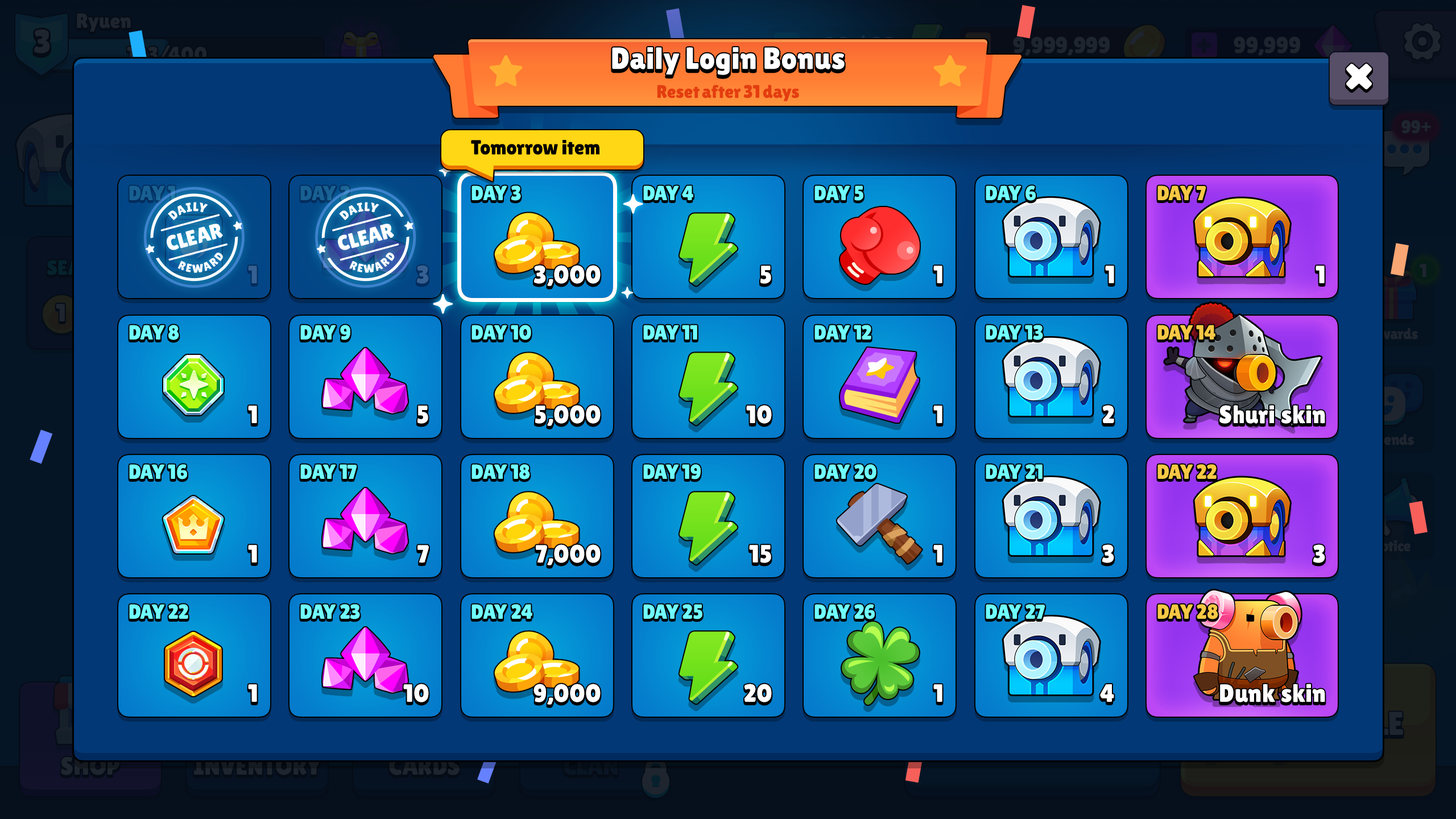
<style>
.page{position:relative;width:1456px;height:819px}
.page>*{position:absolute;margin:0}
.t1{font:30.7px "LilitaOne";color:#ffffff}
.t2{font:18.2px "LilitaOne";letter-spacing:-0.025em;color:#e43d0f}
.t3{font:20.5px "LilitaOne";letter-spacing:-0.01em;color:#000000}
.t4{font:20.5px/139.5px "LilitaOne";color:#70fdff;text-transform:uppercase}
.t5{font:20.5px/139.5px "LilitaOne";color:#f6c845;text-transform:uppercase}
.t6{font:12.7px "LilitaOne";letter-spacing:0.02em;color:#ffffff;text-transform:uppercase}
.t7{font:21.2px "LilitaOne";color:#ffffff;text-transform:uppercase}
.t8{font:11.6px "LilitaOne";letter-spacing:0.15em;color:#ffffff;text-transform:uppercase}
.t9{font:25px/139.5px "LilitaOne";letter-spacing:0.02em;color:#ffffff;text-transform:uppercase}
.t10{font:25px/139.5px "LilitaOne";letter-spacing:0.02em;color:#ffffff}
</style>
<div class="page">
<p class="t1" style="left:612px;top:47px;width:233px;height:28px">Daily Login Bonus</p>
<p class="t2" style="left:657px;top:85px;width:142px;height:16px">Reset after 31 days</p>
<p class="t3" style="left:471px;top:140px;width:128px;height:15px">Tomorrow item</p>
<p class="t4" style="left:129px;top:185px;width:59px;height:434px">Day 1<br>Day 8<br>Day 16<br>Day 22</p>
<p class="t4" style="left:300px;top:185px;width:60px;height:434px">Day 2<br>Day 9<br>Day 17<br>Day 23</p>
<p class="t4" style="left:471px;top:185px;width:61px;height:434px">Day 3<br>Day 10<br>Day 18<br>Day 24</p>
<p class="t4" style="left:643px;top:185px;width:59px;height:434px">Day 4<br>Day 11<br>Day 19<br>Day 25</p>
<p class="t4" style="left:814px;top:185px;width:62px;height:434px">Day 5<br>Day 12<br>Day 20<br>Day 26</p>
<p class="t4" style="left:986px;top:185px;width:59px;height:434px">Day 6<br>Day 13<br>Day 21<br>Day 27</p>
<p class="t5" style="left:1157px;top:185px;width:61px;height:434px">Day 7<br>Day 14<br>Day 22<br>Day 28</p>
<p class="t6" style="left:168px;top:202px;width:40px;height:18px;rotate:-14deg">daily</p>
<p class="t6" style="left:339px;top:202px;width:40px;height:18px;rotate:-14deg">daily</p>
<p class="t7" style="left:167px;top:224px;width:56px;height:26px;rotate:-15deg">clear</p>
<p class="t7" style="left:338px;top:224px;width:56px;height:26px;rotate:-15deg">clear</p>
<p class="t8" style="left:177px;top:253px;width:46px;height:20px;rotate:-14deg">reward</p>
<p class="t8" style="left:349px;top:253px;width:46px;height:20px;rotate:-14deg">reward</p>
<p class="t9" style="left:248px;top:266px;width:9px;height:436px;text-align:right">1<br>1<br>1<br>1</p>
<p class="t9" style="left:403px;top:265px;width:26px;height:437px;text-align:right">3<br>5<br>7<br>10</p>
<p class="t9" style="left:533px;top:265px;width:68px;height:440px;text-align:right">3,000<br>5,000<br>7,000<br>9,000</p>
<p class="t9" style="left:744px;top:266px;width:28px;height:436px;text-align:right">5<br>10<br>15<br>20</p>
<p class="t9" style="left:933px;top:266px;width:9px;height:436px;text-align:right">1<br>1<br>1<br>1</p>
<p class="t9" style="left:1100px;top:266px;width:14px;height:436px;text-align:right">1<br>2<br>3<br>4</p>
<p class="t10" style="left:1219px;top:266px;width:106px;height:436px;text-align:right">1<br>Shuri skin<br>3<br>Dunk skin</p>
</div>
